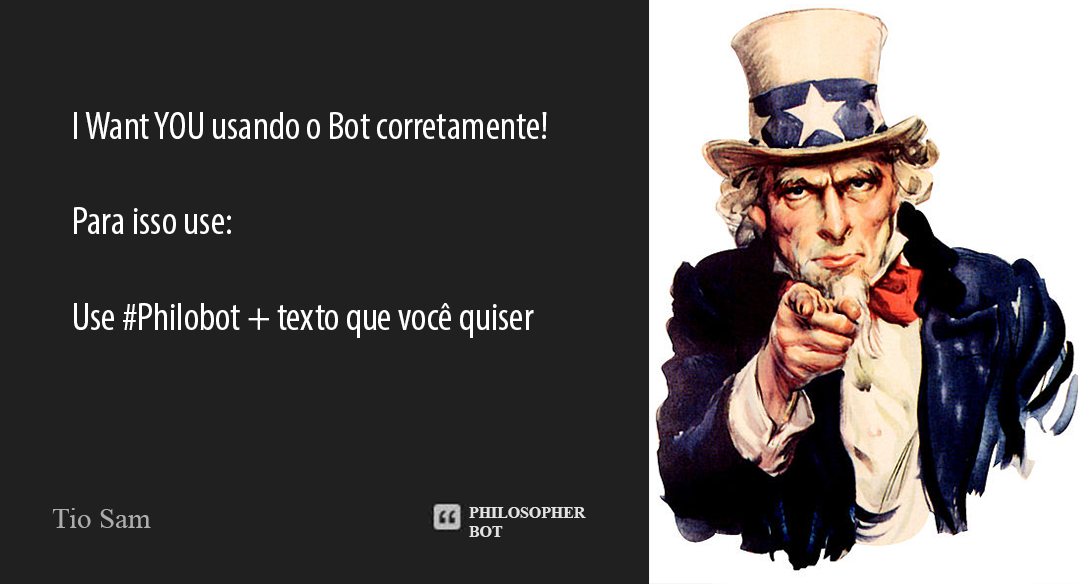
<style>
.page{position:relative;width:1078px;height:584px;background:#202020}
.page>*{position:absolute;margin:0}
.t1{font:39.7px "MyriadPro-Cond";color:#ffffff}
.t2{font:29.2px "TimesNewRomanPSMT";color:#adadad}
</style>
<div class="page">
<p class="t1" style="left:74px;top:112px;width:473px;height:226px">I Want YOU usando o Bot corretamente!<br><br>Para isso use:<br><br>Use #Philobot + texto que você quiser</p>
<p class="t2" style="left:52px;top:508px;width:99px;height:20px">Tio Sam</p>
</div>
